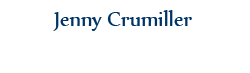
<style>
.page{position:relative;width:250px;height:73px;background:#ffffff}
.page>*{position:absolute;margin:0}
.t1{font:24px "Nyala-Regular";color:#003366}
</style>
<div class="page">
<p class="t1" style="left:53px;top:10px;width:139px;height:21px">Jenny Crumiller</p>
</div>
